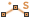
<style>
.page{position:relative;width:30px;height:20px;background:#ffffff}
.page>*{position:absolute;margin:0}
.t1{font:10px "Montserrat-Regular";color:#db9456}
</style>
<div class="page">
<p class="t1" style="left:23px;top:1px;width:6px;height:8px">S</p>
</div>
